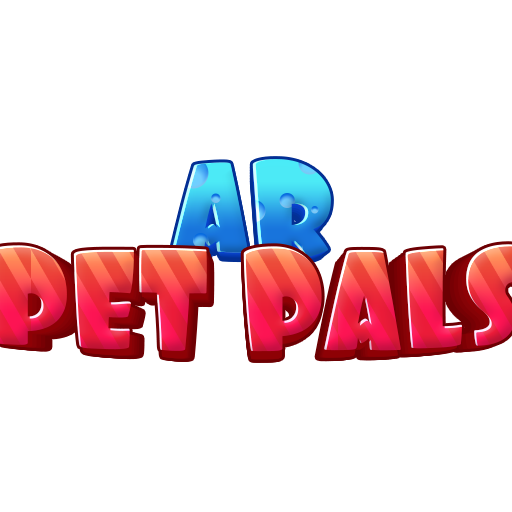
<style>
.page{position:relative;width:512px;height:512px;background:#ffffff}
.page>*{position:absolute;margin:0}
.t1{font:125px "Foo-Regular";letter-spacing:-0.01em}
.t2{font:122.5px "Foo-Regular";letter-spacing:-0.01em}
.t3{font:120.1px "Foo-Regular";letter-spacing:-0.01em}
.t4{font:117.6px "Foo-Regular";letter-spacing:-0.01em}
.t5{font:115.3px "Foo-Regular";letter-spacing:-0.01em}
.t6{font:132.1px "Foo-Regular";letter-spacing:-0.005em;scale:0.91 1}
.t7{font:129.4px "Foo-Regular";letter-spacing:-0.005em;scale:0.91 1}
.t8{font:126.8px "Foo-Regular";letter-spacing:-0.005em;scale:0.91 1}
.t9{font:124.3px "Foo-Regular";letter-spacing:-0.005em;scale:0.91 1}
</style>
<div class="page">
<p class="t1" style="left:171px;top:159px;width:160px;height:99px">AR</p>
<p class="t2" style="left:173px;top:162px;width:157px;height:97px">AR</p>
<p class="t3" style="left:174px;top:164px;width:154px;height:96px">AR</p>
<p class="t4" style="left:176px;top:167px;width:151px;height:94px">AR</p>
<p class="t5" style="left:177px;top:170px;width:148px;height:92px">AR</p>
<p class="t6" style="left:0px;top:249px;width:509px;height:111px">PET PALS</p>
<p class="t7" style="left:4px;top:251px;width:500px;height:109px">PET PALS</p>
<p class="t8" style="left:9px;top:253px;width:490px;height:107px">PET PALS</p>
<p class="t9" style="left:14px;top:256px;width:480px;height:104px">PET PALS</p>
</div>
